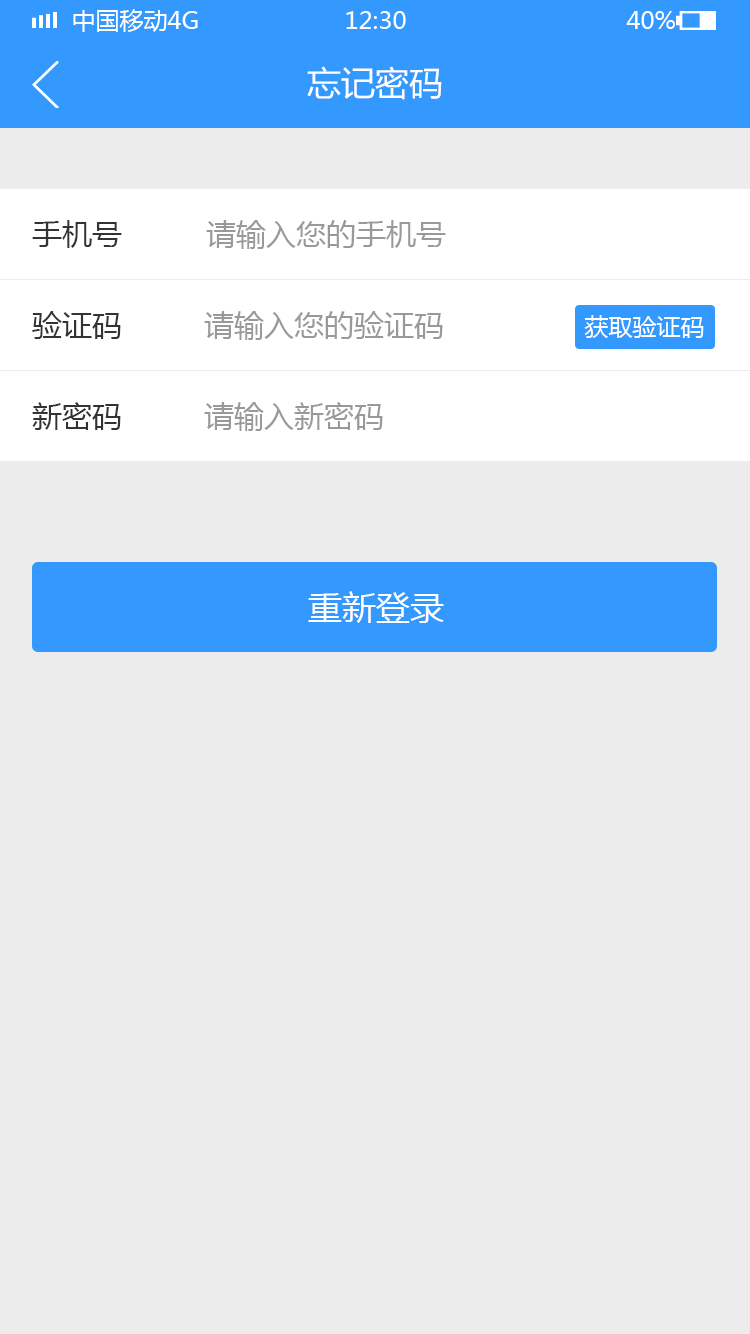
<style>
.page{position:relative;width:750px;height:1334px;background:#ececec}
.page>*{position:absolute;margin:0}
.t1{font:24px "MicrosoftYaHei";color:#ffffff;text-transform:uppercase}
.t2{font:34px "MicrosoftYaHei";color:#ffffff}
.t3{font:30px "MicrosoftYaHei";color:#333333}
.t4{font:30px "MicrosoftYaHei";color:#999999}
.t5{font:24px "MicrosoftYaHei";color:#ffffff}
</style>
<div class="page">
<p class="t1" style="left:73px;top:9px;width:125px;height:23px">中国移动4G</p>
<p class="t1" style="left:346px;top:11px;width:60px;height:18px">12:30</p>
<p class="t1" style="left:626px;top:11px;width:49px;height:18px">40%</p>
<p class="t2" style="left:307px;top:66px;width:135px;height:34px">忘记密码</p>
<p class="t3" style="left:32px;top:220px;width:90px;height:28px">手机号</p>
<p class="t4" style="left:206px;top:220px;width:240px;height:29px">请输入您的手机号</p>
<p class="t3" style="left:32px;top:311px;width:89px;height:28px">验证码</p>
<p class="t4" style="left:204px;top:311px;width:239px;height:29px">请输入您的验证码</p>
<p class="t5" style="left:584px;top:315px;width:120px;height:23px">获取验证码</p>
<p class="t3" style="left:32px;top:402px;width:89px;height:28px">新密码</p>
<p class="t4" style="left:204px;top:402px;width:179px;height:29px">请输入新密码</p>
<p class="t2" style="left:308px;top:591px;width:136px;height:32px">重新登录</p>
</div>
